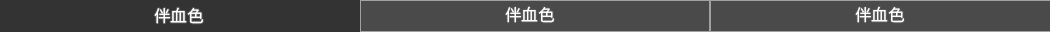
<style>
.page{position:relative;width:1050px;height:32px;background:#4a4a4a}
.page>*{position:absolute;margin:0}
.t1{font:16.7px "SourceHanSansSC-Normal";color:#ffffff}
</style>
<div class="page">
<p class="t1" style="left:505px;top:6px;width:49px;height:17px">伴血色</p>
<p class="t1" style="left:855px;top:6px;width:49px;height:17px">伴血色</p>
<p class="t1" style="left:154px;top:7px;width:49px;height:17px">伴血色</p>
</div>
